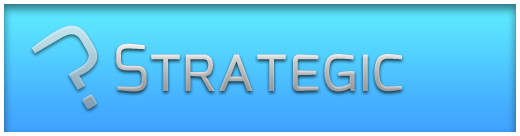
<style>
.page{position:relative;width:520px;height:136px}
.page>*{position:absolute;margin:0}
.t1{font:64px "Exo-Regular";font-variant:small-caps}
</style>
<div class="page">
<p class="t1" style="left:116px;top:43px;width:286px;height:49px">Strategic</p>
</div>
